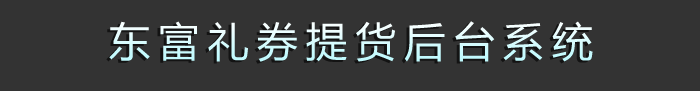
<style>
.page{position:relative;width:700px;height:91px;background:#333333}
.page>*{position:absolute;margin:0}
.t1{font:41px "MicrosoftYaHei";letter-spacing:0.2em}
</style>
<div class="page">
<p class="t1" style="left:109px;top:21px;width:484px;height:41px">东富礼券提货后台系统</p>
</div>
